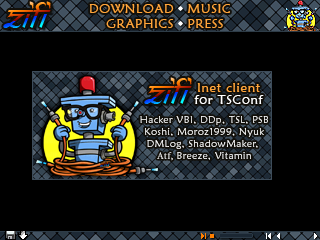
<style>
.page{position:relative;width:320px;height:240px;background:#000000}
.page>*{position:absolute;margin:0}
.t1{font:33.5px "SamarkanOblique";font-style:italic}
.t2{font:13.2px "MaiandraGD-Regular";letter-spacing:0.05em;color:#ffa53b;text-transform:uppercase}
.t3{font:13.2px "MaiandraGD-Regular";letter-spacing:0.05em;color:#ffa53b}
.t4{font:13.2px "MaiandraGD-Regular";letter-spacing:0.05em;color:#ffffff}
.t5{font:10px "MaiandraGD-Regular";letter-spacing:0.05em;color:#ffffff}
.t6{font:10px "MinionPro-Regular";letter-spacing:0.05em;color:#ffffff}
</style>
<div class="page">
<p class="t1" style="left:3px;top:1px;width:48px;height:27px">ZiFi</p>
<p class="t2" style="left:89px;top:4px;width:85px;height:9px">DOWNLOAD</p>
<p class="t2" style="left:187px;top:4px;width:43px;height:9px">Music</p>
<p class="t2" style="left:106px;top:19px;width:67px;height:9px">Graphics</p>
<p class="t3" style="left:188px;top:19px;width:35px;height:9px">PRESS</p>
<p class="t1" style="left:144px;top:77px;width:48px;height:27px">ZiFi</p>
<p class="t3" style="left:197px;top:83px;width:63px;height:9px">Inet client</p>
<p class="t4" style="left:194px;top:95px;width:70px;height:9px">for TSConf</p>
<p class="t5" style="left:140px;top:115px;width:128px;height:46px;text-align:center">Hacker VBI, DDp, TSL, PSB<br>Koshi, Moroz1999, Nyuk<br>DMLog, ShadowMaker, <br><span class="t6">Atf, </span>Breeze, Vitamin</p>
</div>
